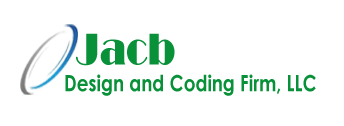
<style>
.page{position:relative;width:344px;height:126px;background:#ffffff}
.page>*{position:absolute;margin:0}
.t1{font:46px "Broadway";color:#099139;scale:0.82 1}
.t2{font:22.4px "CenturyGothic-Bold";color:#099139;scale:0.82 1}
</style>
<div class="page">
<p class="t1" style="left:76px;top:33px;width:99px;height:33px">Jacb</p>
<p class="t2" style="left:65px;top:74px;width:251px;height:22px">Design and Coding Firm, LLC</p>
</div>
